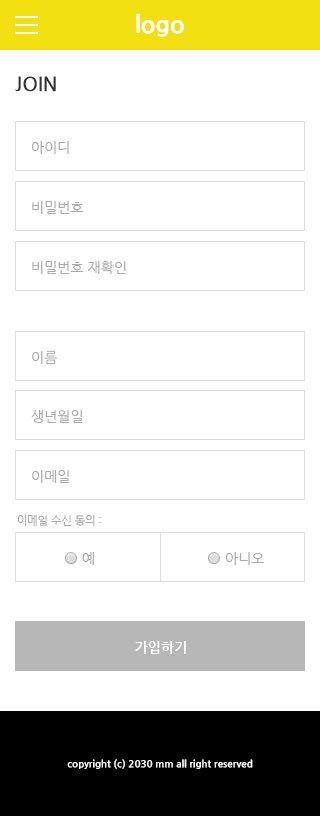
<style>
.page{position:relative;width:320px;height:816px;background:#ffffff}
.page>*{position:absolute;margin:0}
.t1{font:24px "NanumGothicExtraBold";color:#ffffff}
.t2{font:20px "NanumGothicBold";color:#333333;text-transform:uppercase}
.t3{font:14px "NanumGothic";color:#aaaaaa;text-transform:uppercase}
.t4{font:11px "NanumGothic";color:#aaaaaa;text-transform:uppercase}
.t5{font:14px "NanumGothicBold";color:#ffffff;text-transform:uppercase}
.t6{font:10px "NanumGothicExtraBold";color:#ffffff}
</style>
<div class="page">
<p class="t1" style="left:136px;top:13px;width:48px;height:24px">logo</p>
<p class="t2" style="left:15px;top:76px;width:41px;height:16px">join</p>
<p class="t3" style="left:32px;top:141px;width:37px;height:13px">아이디</p>
<p class="t3" style="left:32px;top:201px;width:52px;height:13px">비밀번호</p>
<p class="t3" style="left:32px;top:260px;width:94px;height:15px">비밀번호 재확인</p>
<p class="t3" style="left:32px;top:350px;width:26px;height:15px">이름</p>
<p class="t3" style="left:31px;top:409px;width:52px;height:15px">생년월일</p>
<p class="t3" style="left:32px;top:470px;width:37px;height:13px">이메일</p>
<p class="t4" style="left:17px;top:515px;width:84px;height:11px">이메일 수신 동의 :</p>
<p class="t3" style="left:82px;top:552px;width:12px;height:13px">예</p>
<p class="t3" style="left:226px;top:552px;width:39px;height:13px">아니오</p>
<p class="t5" style="left:135px;top:641px;width:51px;height:13px">가입하기</p>
<p class="t6" style="left:67px;top:759px;width:186px;height:10px">copyright (c) 2030 mm all right reserved</p>
</div>
